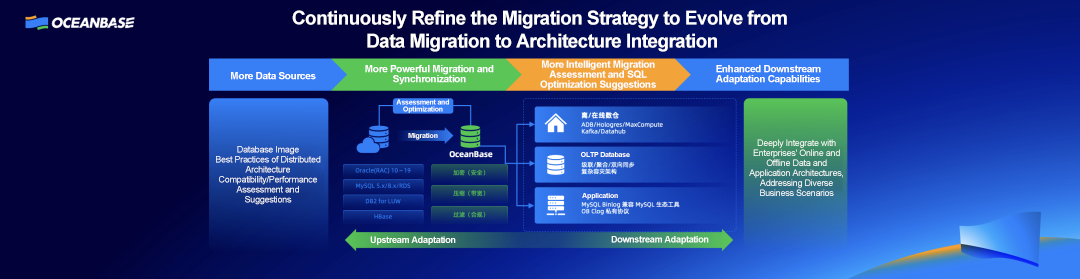
<style>
.page{position:relative;width:1080px;height:279px;background:#020139}
.page>*{position:absolute;margin:0}
.t1{font:19px/23px "Arial-BoldMT";letter-spacing:-0.03em;color:#ffffff}
.t2{font:10px/10px "Arial-BoldMT";letter-spacing:-0.03em;color:#ffffff}
.t3{font:10px "Arial-BoldMT";letter-spacing:-0.03em;color:#ffffff}
.t4{font:7px/7px "Arial-BoldMT";letter-spacing:-0.03em;color:#ffffff}
.t5{font:7px "Arial-BoldMT";letter-spacing:-0.03em;color:#ffffff}
.t6{font:9px/10px "ArialMT";letter-spacing:-0.03em;color:#ffffff}
.t7{font:9px "Arial-BoldMT";letter-spacing:-0.03em;color:#ffffff}
</style>
<div class="page">
<p class="t1" style="left:292px;top:10px;width:495px;height:42px;text-align:center">Continuously Refine the Migration Strategy to Evolve from <br>Data Migration to Architecture Integration</p>
<p class="t2" style="left:365px;top:65px;width:129px;height:20px;text-align:center">More Powerful Migration and Synchronization</p>
<p class="t2" style="left:540px;top:60px;width:116px;height:30px;text-align:center">More Intelligent Migration Assessment and SQL Optimization Suggestions</p>
<p class="t2" style="left:716px;top:65px;width:105px;height:20px;text-align:center">Enhanced Downstream Adaptation Capabilities</p>
<p class="t3" style="left:231px;top:72px;width:85px;height:8px">More Data Sources</p>
<p class="t4" style="left:396px;top:99px;width:53px;height:14px;text-align:center">Assessment and Optimization</p>
<p class="t5" style="left:408px;top:133px;width:30px;height:7px">Migration</p>
<p class="t6" style="left:216px;top:146px;width:105px;height:59px;text-align:center">Database Image<br>Best Practices of Distributed Architecture<br>Compatibility/Performance Assessment and Suggestions</p>
<p class="t6" style="left:749px;top:139px;width:94px;height:57px;text-align:center">Deeply Integrate with Enterprises' Online and Offline Data and Application Architectures, Addressing Diverse Business Scenarios</p>
<p class="t5" style="left:581px;top:152px;width:49px;height:5px">OLTP Database</p>
<p class="t5" style="left:582px;top:193px;width:36px;height:7px">Application</p>
<p class="t7" style="left:370px;top:236px;width:86px;height:9px">Upstream Adaptation</p>
<p class="t7" style="left:611px;top:236px;width:98px;height:9px">Downstream Adaptation</p>
</div>
